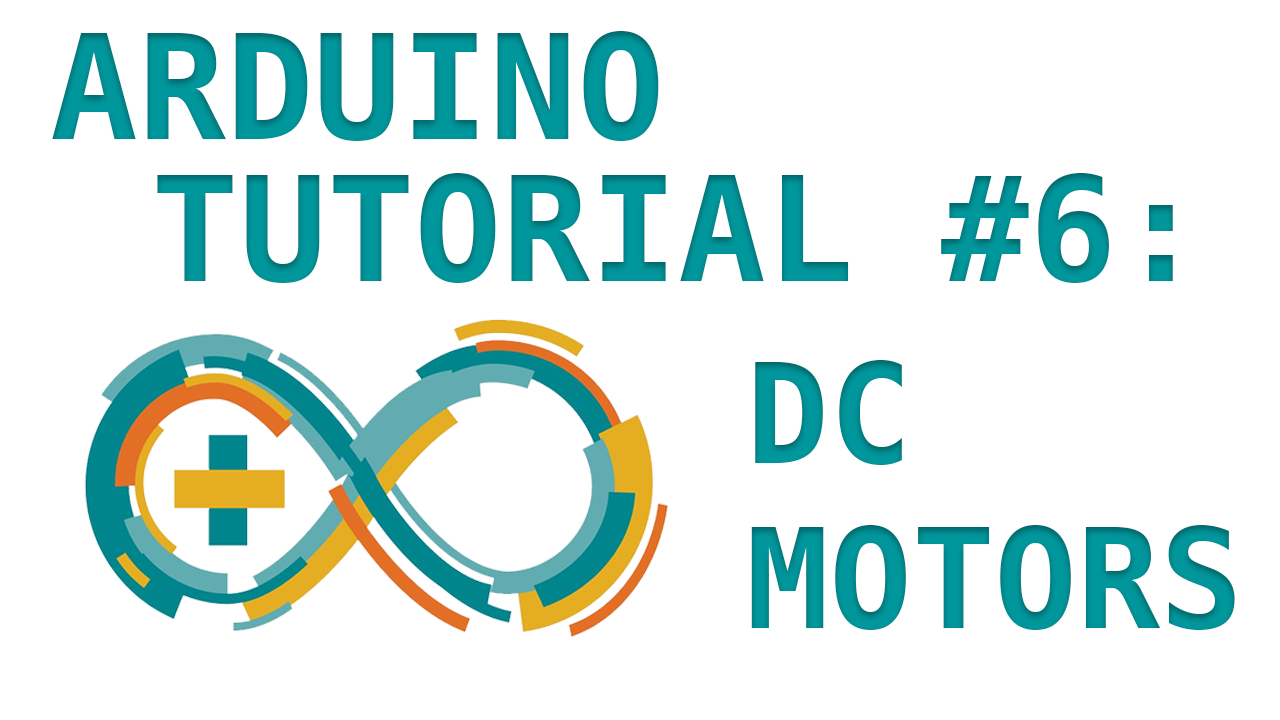
<style>
.page{position:relative;width:1280px;height:720px;background:#ffffff}
.page>*{position:absolute;margin:0}
.t1{font:145.8px "Menlo-Bold";color:#00979c}
.t2{font:137.5px "Menlo-Bold";color:#00979c}
</style>
<div class="page">
<p class="t1" style="left:52px;top:31px;width:607px;height:110px">ARDUINO</p>
<p class="t1" style="left:157px;top:173px;width:1016px;height:110px">TUTORIAL #6:</p>
<p class="t2" style="left:751px;top:360px;width:484px;height:270px">DC<br>MOTORS</p>
</div>
